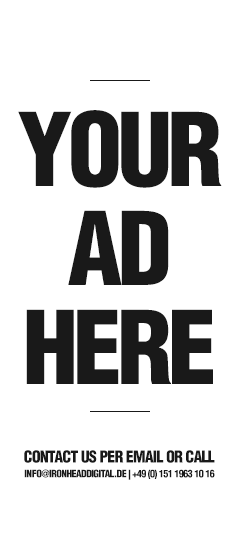
<style>
.page{position:relative;width:240px;height:549px;background:#ffffff}
.page>*{position:absolute;margin:0}
.t1{font:99px/99px "HelveticaLTStd-BlkCond";letter-spacing:-0.05em;color:#191919}
.t2{font:16px "HelveticaLTStd-BlkCond";letter-spacing:-0.05em;color:#191919}
.t3{font:10px "HelveticaLTStd-BlkCond";letter-spacing:-0.05em;color:#191919}
</style>
<div class="page">
<p class="t1" style="left:18px;top:110px;width:204px;height:274px;text-align:center">YOUR<br>AD<br>HERE</p>
<p class="t2" style="left:24px;top:450px;width:191px;height:13px">CONTACT US PER EMAIL OR CALL</p>
<p class="t3" style="left:24px;top:469px;width:191px;height:11px">INFO@IRONHEADDIGITAL.DE | +49 (0) 151 1963 10 16</p>
</div>
